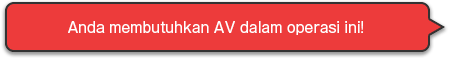
<style>
.page{position:relative;width:450px;height:58px;background:#ed3b3b}
.page>*{position:absolute;margin:0}
.t1{font:14px "GothicMB101Pro-Regular";color:#ffffff}
</style>
<div class="page">
<p class="t1" style="left:68px;top:21px;width:295px;height:14px">Anda membutuhkan AV dalam operasi ini!</p>
</div>
